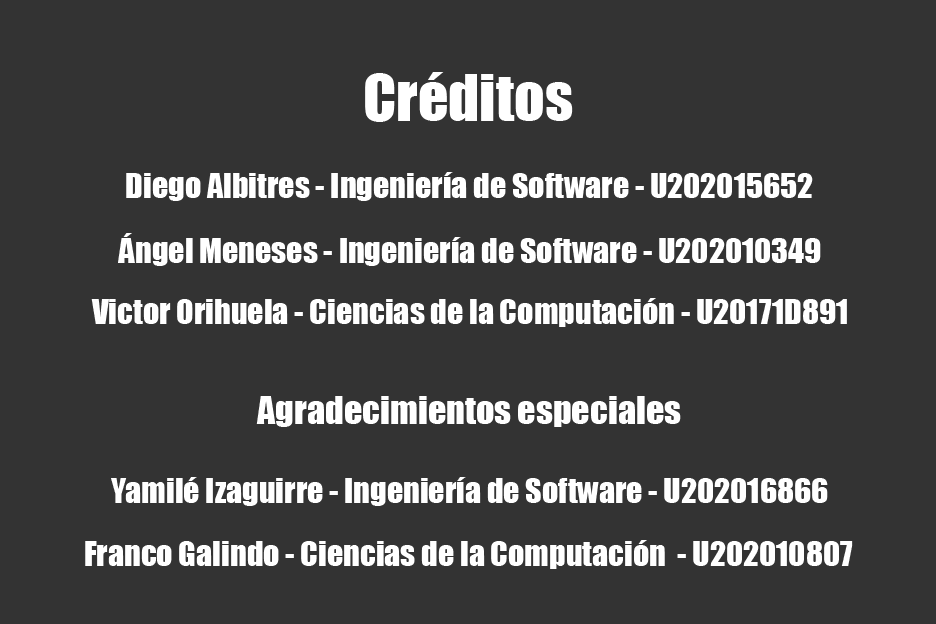
<style>
.page{position:relative;width:936px;height:624px;background:#333333}
.page>*{position:absolute;margin:0}
.t1{font:60px "Impact";color:#ffffff}
.t2{font:32px "Impact";color:#ffffff}
.t3{font:36px "Impact";color:#ffffff}
</style>
<div class="page">
<p class="t1" style="left:365px;top:72px;width:208px;height:50px">Créditos</p>
<p class="t2" style="left:126px;top:172px;width:687px;height:29px">Diego Albitres - Ingeniería de Software - U202015652</p>
<p class="t2" style="left:118px;top:233px;width:703px;height:33px">Ángel Meneses - Ingeniería de Software - U202010349</p>
<p class="t2" style="left:91px;top:298px;width:756px;height:29px">Victor Orihuela - Ciencias de la Computación - U20171D891</p>
<p class="t3" style="left:256px;top:396px;width:425px;height:31px">Agradecimientos especiales</p>
<p class="t2" style="left:111px;top:477px;width:717px;height:29px">Yamilé Izaguirre - Ingeniería de Software - U202016866</p>
<p class="t2" style="left:85px;top:540px;width:768px;height:29px">Franco Galindo - Ciencias de la Computación  - U202010807</p>
</div>
